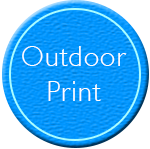
<style>
.page{position:relative;width:150px;height:149px;background:#ffffff}
.page>*{position:absolute;margin:0}
.t1{font:28.7px/34.5px "Humanist521BT-Light";letter-spacing:0.045em;color:#ffffff}
</style>
<div class="page">
<p class="t1" style="left:22px;top:46px;width:105px;height:55px;text-align:center">Outdoor<br>Print</p>
</div>
